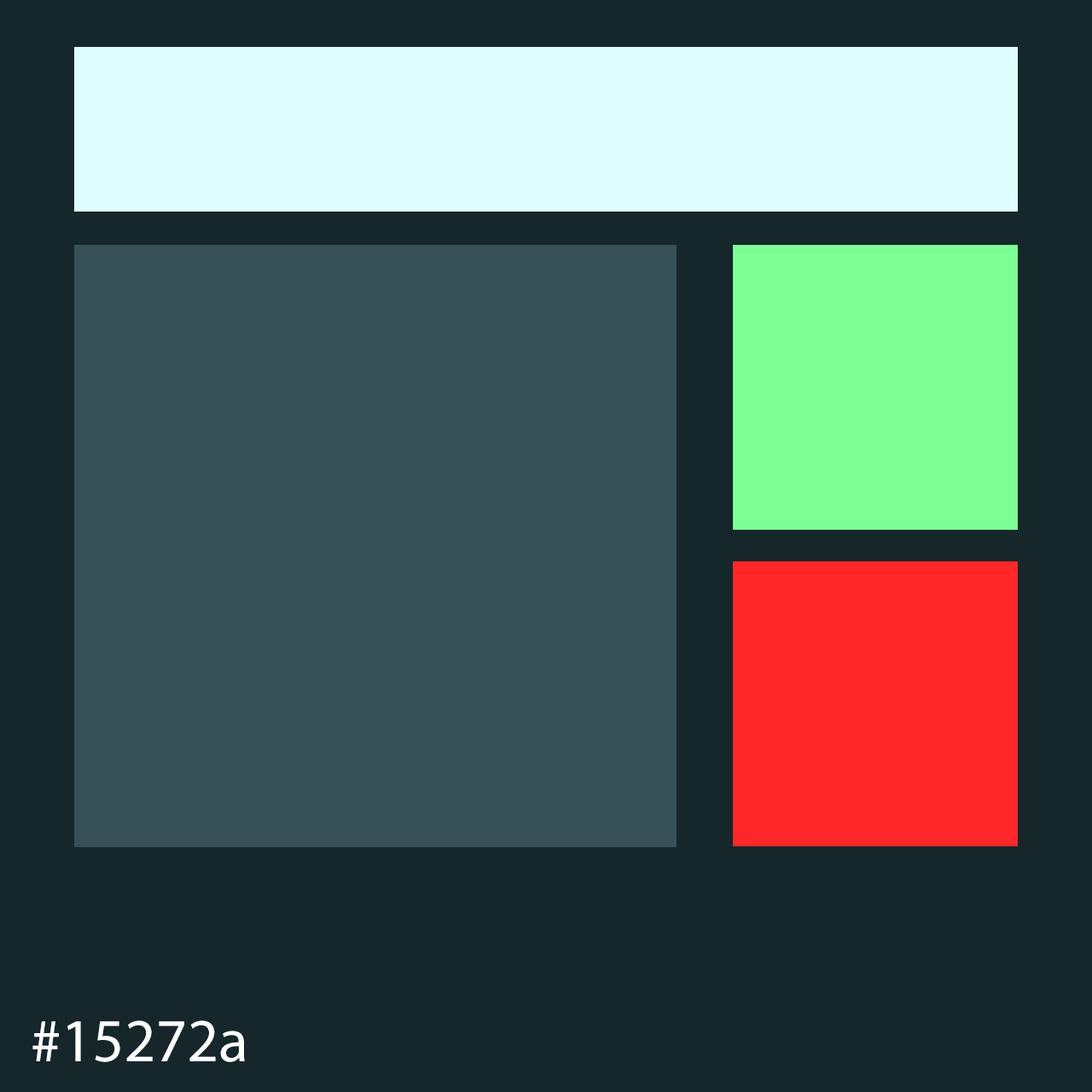
<style>
.page{position:relative;width:1092px;height:1092px;background:#15272b}
.page>*{position:absolute;margin:0}
.t1{font:61.4px "MyriadPro-Regular";color:#ffffff}
</style>
<div class="page">
<p class="t1" style="left:32px;top:1020px;width:213px;height:42px">#15272a</p>
</div>
